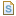
<style>
.page{position:relative;width:16px;height:16px;background:#ffffff}
.page>*{position:absolute;margin:0}
.t1{font:10px "Arial-BoldMT";color:#6aa0c5}
</style>
<div class="page">
<p class="t1" style="left:5px;top:5px;width:7px;height:8px">S</p>
</div>
